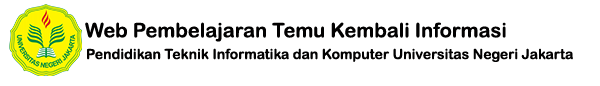
<style>
.page{position:relative;width:600px;height:86px;background:#ffffff}
.page>*{position:absolute;margin:0}
.t1{font:20px "ArialRoundedMTBold";color:#020202}
.t2{font:14px "ArialRoundedMTBold";color:#020202}
</style>
<div class="page">
<p class="t1" style="left:85px;top:22px;width:421px;height:20px">Web Pembelajaran Temu Kembali Informasi</p>
<p class="t2" style="left:87px;top:48px;width:486px;height:14px">Pendidikan Teknik Informatika dan Komputer Universitas Negeri Jakarta</p>
</div>
